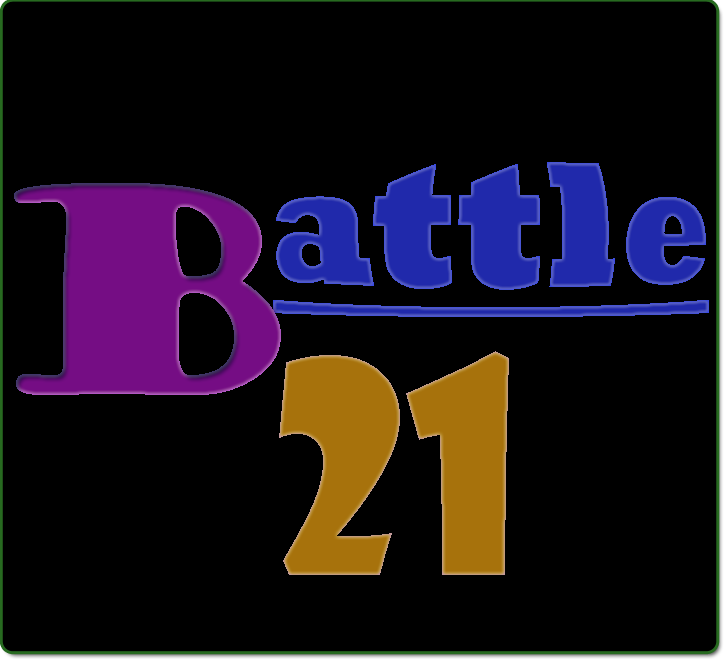
<style>
.page{position:relative;width:726px;height:662px;background:#000000}
.page>*{position:absolute;margin:0}
.t1{font:160px "Rockwell-ExtraBold";letter-spacing:-0.01em;color:#2029ab;text-decoration:underline}
.t2{font:284.4px "GoudyStout";letter-spacing:-0.01em;color:#750d84}
.t3{font:288px "ShowcardGothic-Reg";letter-spacing:-0.01em;color:#a7720c}
</style>
<div class="page">
<p class="t1" style="left:273px;top:162px;width:436px;height:155px">attle</p>
<p class="t2" style="left:14px;top:183px;width:267px;height:212px">B</p>
<p class="t3" style="left:279px;top:351px;width:230px;height:224px">21</p>
</div>
